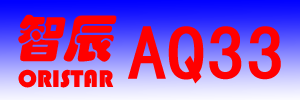
<style>
.page{position:relative;width:300px;height:100px;background:#ff0000}
.page>*{position:absolute;margin:0}
.t1{font:50px "STHupo";color:#ff0000;font-style:italic}
.t2{font:75px "SimHei";color:#ff0000;font-weight:bold}
.t3{font:25px "STHupo";color:#ff0000}
</style>
<div class="page">
<p class="t1" style="left:18px;top:14px;width:99px;height:48px">智辰</p>
<p class="t2" style="left:128px;top:26px;width:153px;height:58px">AQ33</p>
<p class="t3" style="left:18px;top:69px;width:96px;height:19px">ORISTAR</p>
</div>
